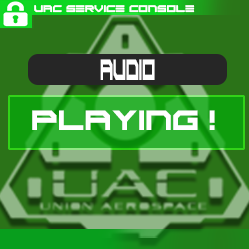
<style>
.page{position:relative;width:249px;height:249px;background:#2b7318}
.page>*{position:absolute;margin:0}
.t1{font:6.8px "ScifiAdventure";color:#ffffff}
.t2{font:20.5px "ScifiAdventure";color:#ffffff;scale:0.46 1}
.t3{font:19.4px "ScifiAdventure";color:#ffffff}
</style>
<div class="page">
<p class="t1" style="left:34px;top:5px;width:161px;height:8px">UAC SERVICE CONSOLE</p>
<p class="t2" style="left:100px;top:59px;width:55px;height:21px">AUDIO</p>
<p class="t3" style="left:32px;top:110px;width:183px;height:20px">PLAYING!</p>
</div>
